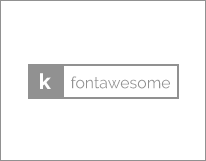
<style>
.page{position:relative;width:206px;height:161px;background:#ffffff}
.page>*{position:absolute;margin:0}
.t1{font:21.3px "Raleway-SemiBold";color:#ffffff;font-weight:bold}
.t2{font:15.9px "Raleway-Regular";color:#919191}
</style>
<div class="page">
<p class="t1" style="left:40px;top:73px;width:11px;height:16px">k</p>
<p class="t2" style="left:71px;top:76px;width:99px;height:13px">fontawesome</p>
</div>
